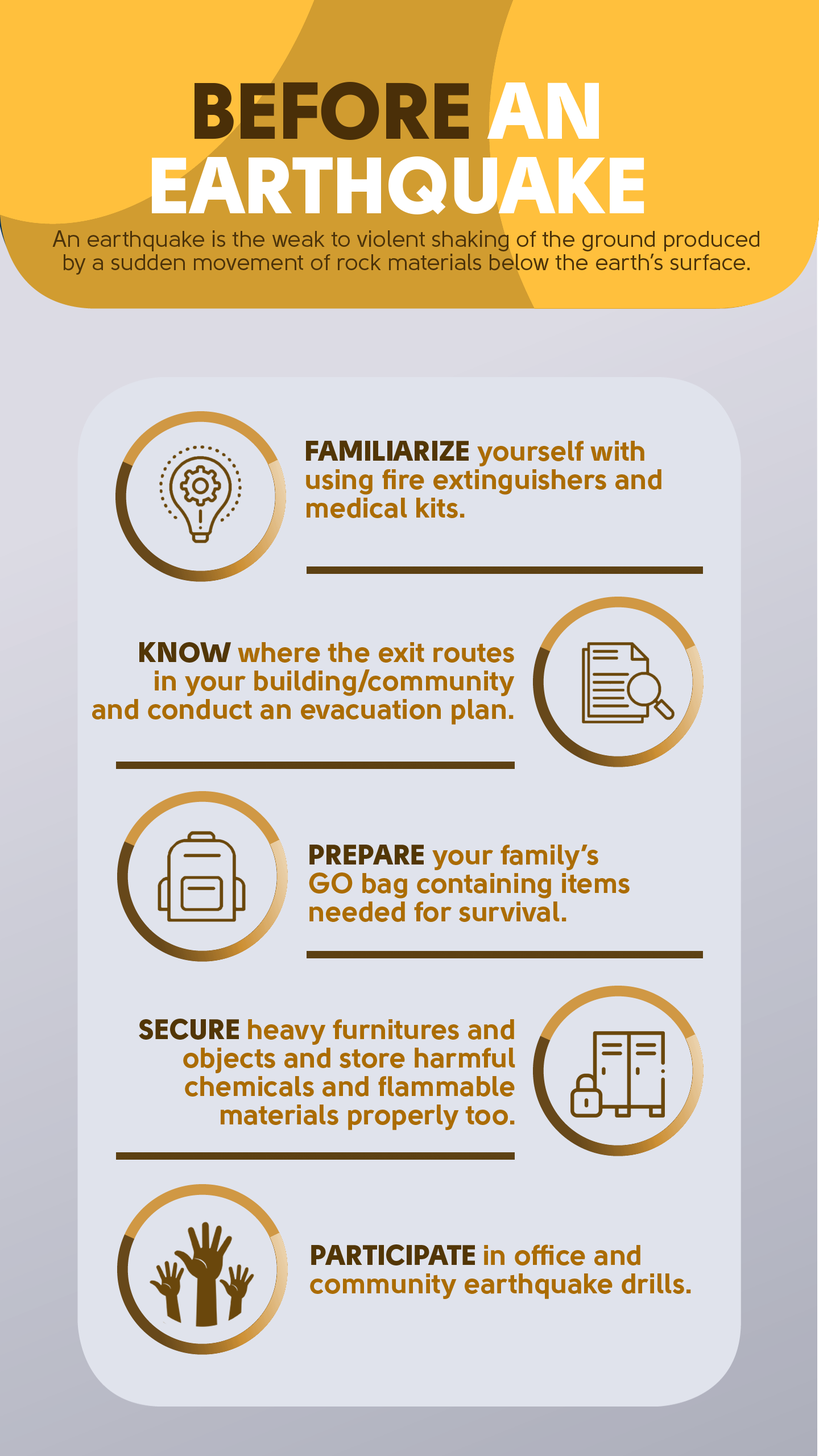
<style>
.page{position:relative;width:819px;height:1456px;background:#e0e3ec}
.page>*{position:absolute;margin:0}
.t1{font:79.6px/74.5px "Solomon-Sans-Black";color:#ffffff}
.t2{font:79.6px/74.5px "Solomon-Sans-Black";color:#4a2f08}
.t3{font:22.7px/23.3px "Solomon-Sans-Normal";color:#4c330a}
.t4{font:28.4px/28.4px "Solomon-Sans-Bold";color:#ab6c03}
.t5{font:28.4px/28.4px "Solomon-Sans-Black";color:#523606}
</style>
<div class="page">
<p class="t1" style="left:152px;top:82px;width:492px;height:132px;text-align:center"><span class="t2">BEFORE</span> AN<br>EARTHQUAKE</p>
<p class="t3" style="left:52px;top:230px;width:707px;height:45px;text-align:center">An earthquake is the weak to violent shaking of the ground produced<br>by a sudden movement of rock materials below the earth’s surface.</p>
<p class="t4" style="left:306px;top:440px;width:355px;height:78px"><span class="t5">FAMILIARIZE </span>yourself with<br>using fire extinguishers and<br>medical kits.</p>
<p class="t4" style="left:92px;top:642px;width:423px;height:83px;text-align:right"><span class="t5">KNOW </span>where the exit routes<br>in your building/community<br>and conduct an evacuation plan.</p>
<p class="t4" style="left:309px;top:845px;width:321px;height:77px"><span class="t5">PREPARE </span>your family’s<br>GO bag containing items<br>needed for survival.</p>
<p class="t4" style="left:139px;top:1019px;width:376px;height:111px;text-align:right"><span class="t5">SECURE </span>heavy furnitures and<br>objects and store harmful<br>chemicals and flammable<br>materials properly too.</p>
<p class="t4" style="left:310px;top:1244px;width:381px;height:55px"><span class="t5">PARTICIPATE </span>in office and<br>community earthquake drills.</p>
</div>
